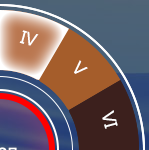
<style>
.page{position:relative;width:149px;height:150px}
.page>*{position:absolute;margin:0}
.t1{font:18px "SegoeUI";color:#ffffff}
</style>
<div class="page">
<p class="t1" style="left:19px;top:30px;width:20px;height:16px;rotate:15deg">IV</p>
<p class="t1" style="left:74px;top:60px;width:14px;height:14px;rotate:45deg">V</p>
<p class="t1" style="left:102px;top:110px;width:16px;height:19px;rotate:75deg">VI</p>
</div>
